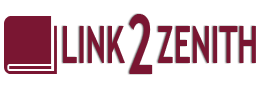
<style>
.page{position:relative;width:260px;height:90px;background:#ffffff}
.page>*{position:absolute;margin:0}
.t1{font:82.6px "TrebuchetMS-Bold";color:#7a1632;scale:0.58 1}
.t2{font:51.6px "TrebuchetMS-Bold";color:#7a1632;scale:0.58 1}
</style>
<div class="page">
<p class="t1" style="left:129px;top:14px;width:24px;height:60px">2</p>
<p class="t2" style="left:63px;top:26px;width:193px;height:37px">LINK   ZENITH</p>
</div>
